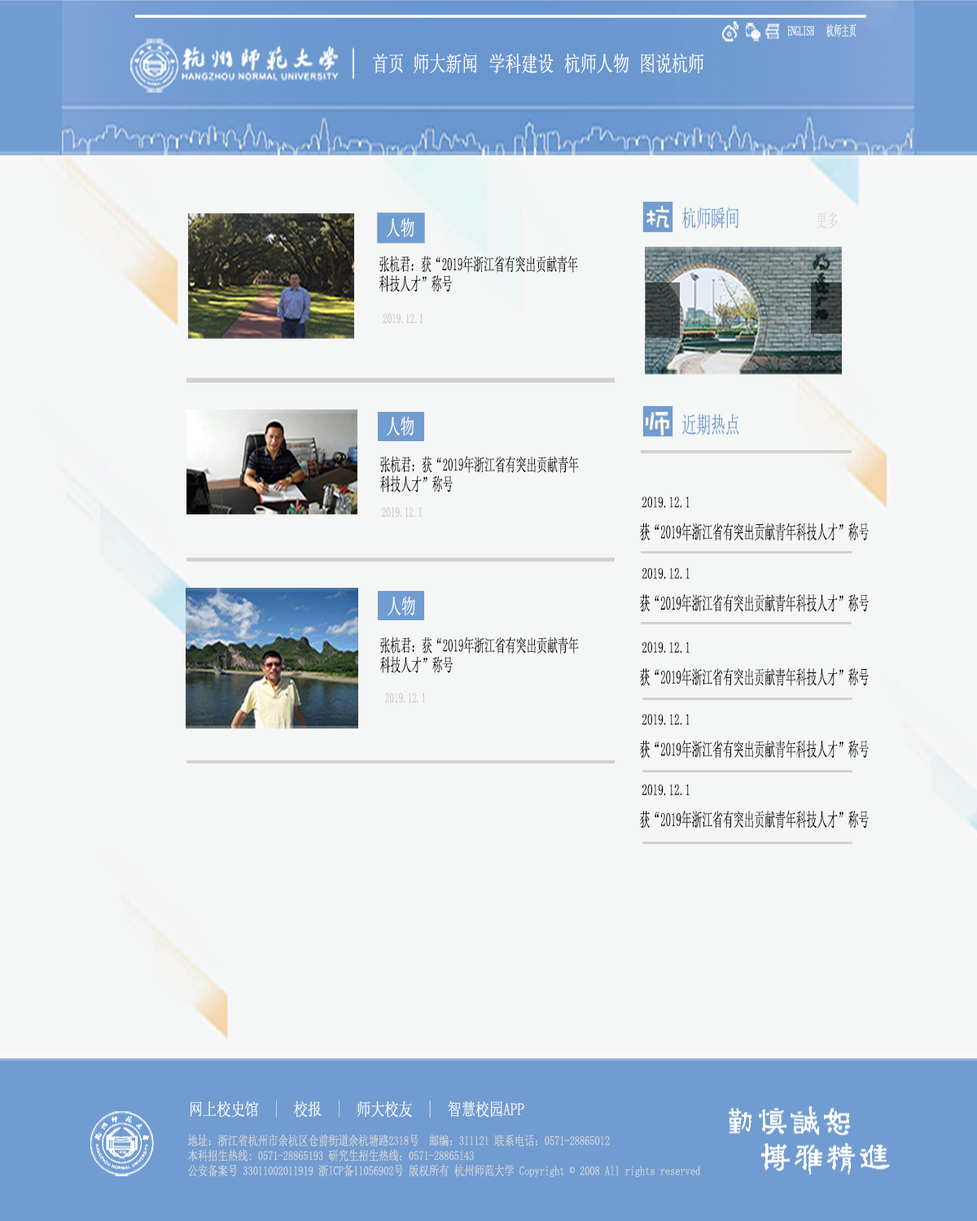
<style>
.page{position:relative;width:977px;height:1221px;background:#f5f7f6}
.page>*{position:absolute;margin:0}
.t1{font:13.4px "SimSun";color:#fefefd;scale:0.56 1}
.t2{font:13.8px "SimSun";color:#fefefd;scale:0.54 1}
.t3{font:21.3px "SimSun";color:#fefefd;scale:0.76 1}
.t4{font:23.3px "SimSun";color:#719cd1;scale:0.62 1}
.t5{font:21.2px "SimSun";color:#fefefd;scale:0.67 1}
.t6{font:17.3px "SimSun";color:#d0d0cb;scale:0.65 1}
.t7{font:17.9px/19.5px "SimSun";color:#040404;scale:0.59 1}
.t8{font:13.8px "SimSun";color:#c9c8c7;scale:0.66 1}
.t9{font:21.1px "SimSun";color:#fefefd;scale:0.68 1}
.t10{font:17.8px/19.5px "SimSun";color:#040404;scale:0.59 1}
.t11{font:15.5px "SimSun";color:#020202;scale:0.69 1}
.t12{font:19px "SimSun";color:#040404;scale:0.55 1}
.t13{font:17.7px/19.5px "SimSun";color:#040404;scale:0.59 1}
.t14{font:13.7px "SimSun";color:#c9c8c7;scale:0.66 1}
.t15{font:17.1px "SimSun";color:#f9fafc;scale:0.82 1}
.t16{font:12.8px/15px "SimSun";color:#d5d5d5;scale:0.78 1}
</style>
<div class="page">
<p class="t1" style="left:787px;top:26px;width:27px;height:10px">ENGLISH</p>
<p class="t2" style="left:826px;top:24px;width:30px;height:13px">杭师主页</p>
<p class="t3" style="left:373px;top:53px;width:31px;height:20px">首页</p>
<p class="t3" style="left:413px;top:53px;width:64px;height:20px">师大新闻</p>
<p class="t3" style="left:489px;top:53px;width:64px;height:21px">学科建设</p>
<p class="t3" style="left:564px;top:53px;width:64px;height:20px">杭师人物</p>
<p class="t3" style="left:641px;top:53px;width:62px;height:20px">图说杭师</p>
<p class="t4" style="left:682px;top:207px;width:56px;height:22px">杭师瞬间</p>
<p class="t5" style="left:387px;top:217px;width:27px;height:21px">人物</p>
<p class="t6" style="left:816px;top:212px;width:22px;height:17px">更多</p>
<p class="t7" style="left:379px;top:256px;width:199px;height:36px">张杭君：获“2019年浙江省有突出贡献青年<br>科技人才”称号</p>
<p class="t8" style="left:383px;top:313px;width:40px;height:10px">2019.12.1</p>
<p class="t4" style="left:682px;top:413px;width:57px;height:22px">近期热点</p>
<p class="t9" style="left:386px;top:416px;width:28px;height:20px">人物</p>
<p class="t10" style="left:380px;top:456px;width:199px;height:36px">张杭君：获“2019年浙江省有突出贡献青年<br>科技人才”称号</p>
<p class="t11" style="left:642px;top:496px;width:47px;height:12px">2019.12.1</p>
<p class="t8" style="left:382px;top:507px;width:40px;height:10px">2019.12.1</p>
<p class="t12" style="left:640px;top:523px;width:228px;height:18px">获“2019年浙江省有突出贡献青年科技人才”称号</p>
<p class="t11" style="left:642px;top:567px;width:47px;height:12px">2019.12.1</p>
<p class="t12" style="left:640px;top:593px;width:228px;height:19px">获“2019年浙江省有突出贡献青年科技人才”称号</p>
<p class="t13" style="left:380px;top:636px;width:199px;height:37px">张杭君：获“2019年浙江省有突出贡献青年<br>科技人才”称号</p>
<p class="t11" style="left:642px;top:641px;width:47px;height:12px">2019.12.1</p>
<p class="t12" style="left:640px;top:667px;width:228px;height:19px">获“2019年浙江省有突出贡献青年科技人才”称号</p>
<p class="t14" style="left:385px;top:693px;width:40px;height:9px">2019.12.1</p>
<p class="t11" style="left:642px;top:714px;width:47px;height:11px">2019.12.1</p>
<p class="t12" style="left:640px;top:740px;width:228px;height:19px">获“2019年浙江省有突出贡献青年科技人才”称号</p>
<p class="t11" style="left:642px;top:784px;width:47px;height:11px">2019.12.1</p>
<p class="t12" style="left:640px;top:810px;width:228px;height:19px">获“2019年浙江省有突出贡献青年科技人才”称号</p>
<p class="t15" style="left:190px;top:1100px;width:334px;height:18px">网上校史馆  |  校报  |  师大校友  |  智慧校园APP</p>
<p class="t16" style="left:187px;top:1134px;width:513px;height:43px">地址：浙江省杭州市余杭区仓前街道余杭塘路2318号　邮编：311121 联系电话：0571-28865012<br>本科招生热线: 0571-28865193 研究生招生热线：0571-28865143<br>公安备案号 33011002011919 浙ICP备11056902号 版权所有 杭州师范大学 Copyright © 2008 All rights reserved</p>
</div>
